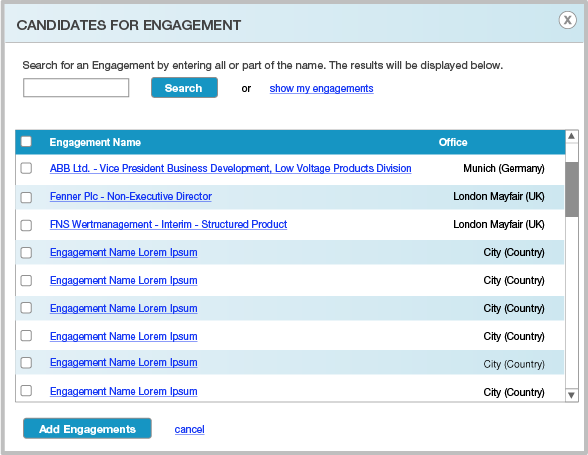
<style>
.page{position:relative;width:588px;height:455px;background:#ffffff}
.page>*{position:absolute;margin:0}
.t1{font:14px "HelveticaNeue-Medium";color:#424242}
.t2{font:11px "HelveticaNeue-Roman";color:#424242}
.t3{font:11px "HelveticaNeue-Bold";color:#ffffff}
.t4{font:10px "HelveticaNeue-Roman";color:#000000}
.t5{font:10px "HelveticaNeue-Roman";color:#1738f4;text-decoration:underline}
.t6{font:10px "HelveticaNeue-Bold";color:#ffffff}
.t7{font:10px "HelveticaNeueLTStd-Roman";color:#1738f4;text-decoration:underline}
</style>
<div class="page">
<p class="t1" style="left:17px;top:20px;width:225px;height:11px">CANDIDATES FOR ENGAGEMENT</p>
<p class="t2" style="left:23px;top:61px;width:480px;height:10px">Search for an Engagement by entering all or part of the name. The results will be displayed below.</p>
<p class="t3" style="left:165px;top:84px;width:37px;height:8px">Search</p>
<p class="t4" style="left:242px;top:86px;width:9px;height:6px">or</p>
<p class="t5" style="left:269px;top:84px;width:105px;height:10px">show my engagements</p>
<p class="t6" style="left:50px;top:138px;width:91px;height:10px">Engagement Name</p>
<p class="t6" style="left:439px;top:138px;width:29px;height:8px">Office</p>
<p class="t5" style="left:49px;top:164px;width:363px;height:10px">ABB Ltd. - Vice President Business Development, Low Voltage Products Division</p>
<p class="t4" style="left:464px;top:164px;width:81px;height:10px">Munich (Germany)</p>
<p class="t5" style="left:49px;top:192px;width:163px;height:10px">Fenner Plc - Non-Executive Director</p>
<p class="t4" style="left:454px;top:192px;width:91px;height:10px">London Mayfair (UK)</p>
<p class="t7" style="left:49px;top:220px;width:239px;height:10px">FNS Wertmanagement - Interim - Structured Product</p>
<p class="t4" style="left:454px;top:220px;width:91px;height:10px">London Mayfair (UK)</p>
<p class="t7" style="left:49px;top:248px;width:149px;height:10px">Engagement Name Lorem Ipsum</p>
<p class="t4" style="left:484px;top:248px;width:61px;height:10px">City (Country)</p>
<p class="t7" style="left:49px;top:276px;width:149px;height:10px">Engagement Name Lorem Ipsum</p>
<p class="t4" style="left:484px;top:276px;width:61px;height:10px">City (Country)</p>
<p class="t7" style="left:49px;top:304px;width:149px;height:10px">Engagement Name Lorem Ipsum</p>
<p class="t4" style="left:484px;top:304px;width:61px;height:10px">City (Country)</p>
<p class="t7" style="left:49px;top:332px;width:149px;height:10px">Engagement Name Lorem Ipsum</p>
<p class="t4" style="left:484px;top:332px;width:61px;height:10px">City (Country)</p>
<p class="t7" style="left:49px;top:358px;width:149px;height:10px">Engagement Name Lorem Ipsum</p>
<p class="t7" style="left:49px;top:387px;width:149px;height:10px">Engagement Name Lorem Ipsum</p>
<p class="t4" style="left:484px;top:388px;width:61px;height:10px">City (Country)</p>
<p class="t3" style="left:39px;top:425px;width:97px;height:10px">Add Engagements</p>
<p class="t5" style="left:175px;top:425px;width:30px;height:10px">cancel</p>
</div>
